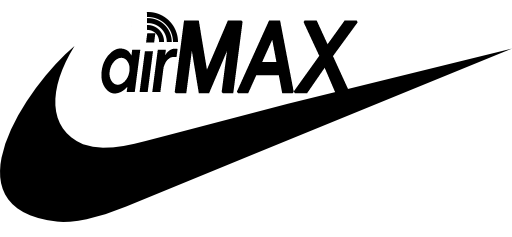
<style>
.page{position:relative;width:512px;height:237px;background:#ffffff}
.page>*{position:absolute;margin:0}
.t1{font:75px "ExpoM-HM";color:#000000;font-style:italic;scale:0.74 1}
.t2{font:90px "ExpoM-HM";color:#000000;font-weight:bold;font-style:italic;scale:0.74 1}
</style>
<div class="page">
<p class="t1" style="left:101px;top:20px;width:257px;height:74px">air<span class="t2">MAX</span></p>
</div>
